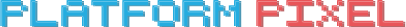
<style>
.page{position:relative;width:406px;height:27px;background:#ffffff}
.page>*{position:absolute;margin:0}
.t1{font:36px "Petyka-RetroComputer___SHORT";color:#25acdf}
.t2{font:36px "Petyka-RetroComputer___SHORT";color:#e85559}
</style>
<div class="page">
<p class="t1" style="left:0px;top:0px;width:404px;height:26px">Platform <span class="t2">Pixel</span></p>
<p class="t1" style="left:2px;top:1px;width:404px;height:26px">Platform <span class="t2">Pixel</span></p>
</div>
